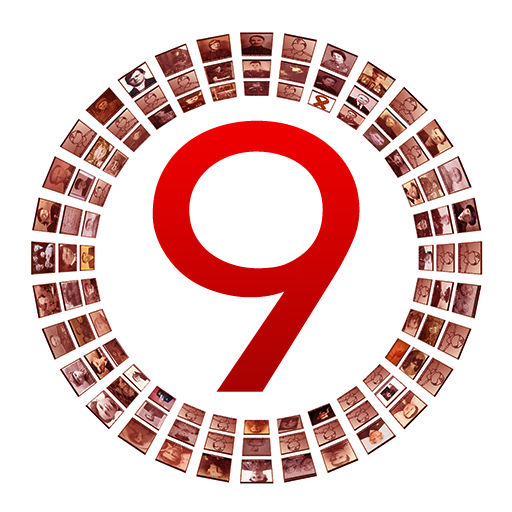
<style>
.page{position:relative;width:512px;height:512px;background:#ffffff}
.page>*{position:absolute;margin:0}
.t1{font:360px "Arvo";letter-spacing:0.008em;scale:1.11 1}
</style>
<div class="page">
<p class="t1" style="left:152px;top:120px;width:208px;height:272px">9</p>
</div>
